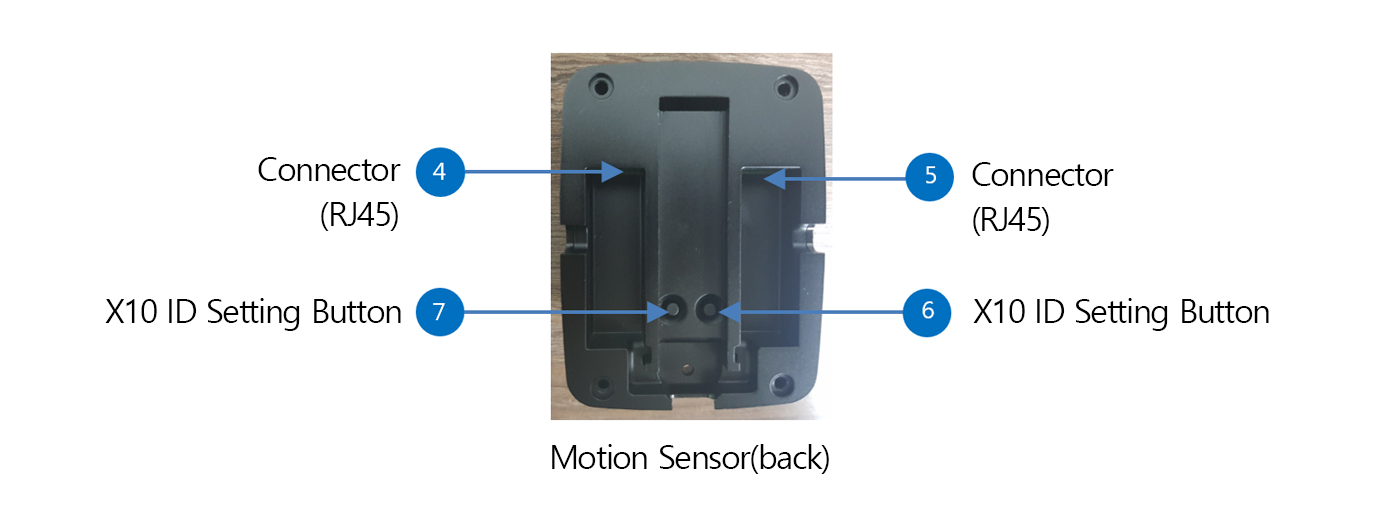
<style>
.page{position:relative;width:1400px;height:505px;background:#ffffff}
.page>*{position:absolute;margin:0}
.t1{font:33.3px/45.8px "MalgunGothic";letter-spacing:-0.05em;color:#000000}
.t2{font:33.3px "MalgunGothic";letter-spacing:-0.05em;color:#000000}
</style>
<div class="page">
<p class="t1" style="left:258px;top:157px;width:143px;height:74px;text-align:right">Connector<br>(RJ45)</p>
<p class="t1" style="left:972px;top:162px;width:142px;height:74px">Connector<br>(RJ45)</p>
<p class="t2" style="left:105px;top:298px;width:296px;height:33px">X10 ID Setting Button</p>
<p class="t2" style="left:973px;top:298px;width:296px;height:33px">X10 ID Setting Button</p>
<p class="t2" style="left:552px;top:444px;width:277px;height:30px">Motion Sensor(back)</p>
</div>
